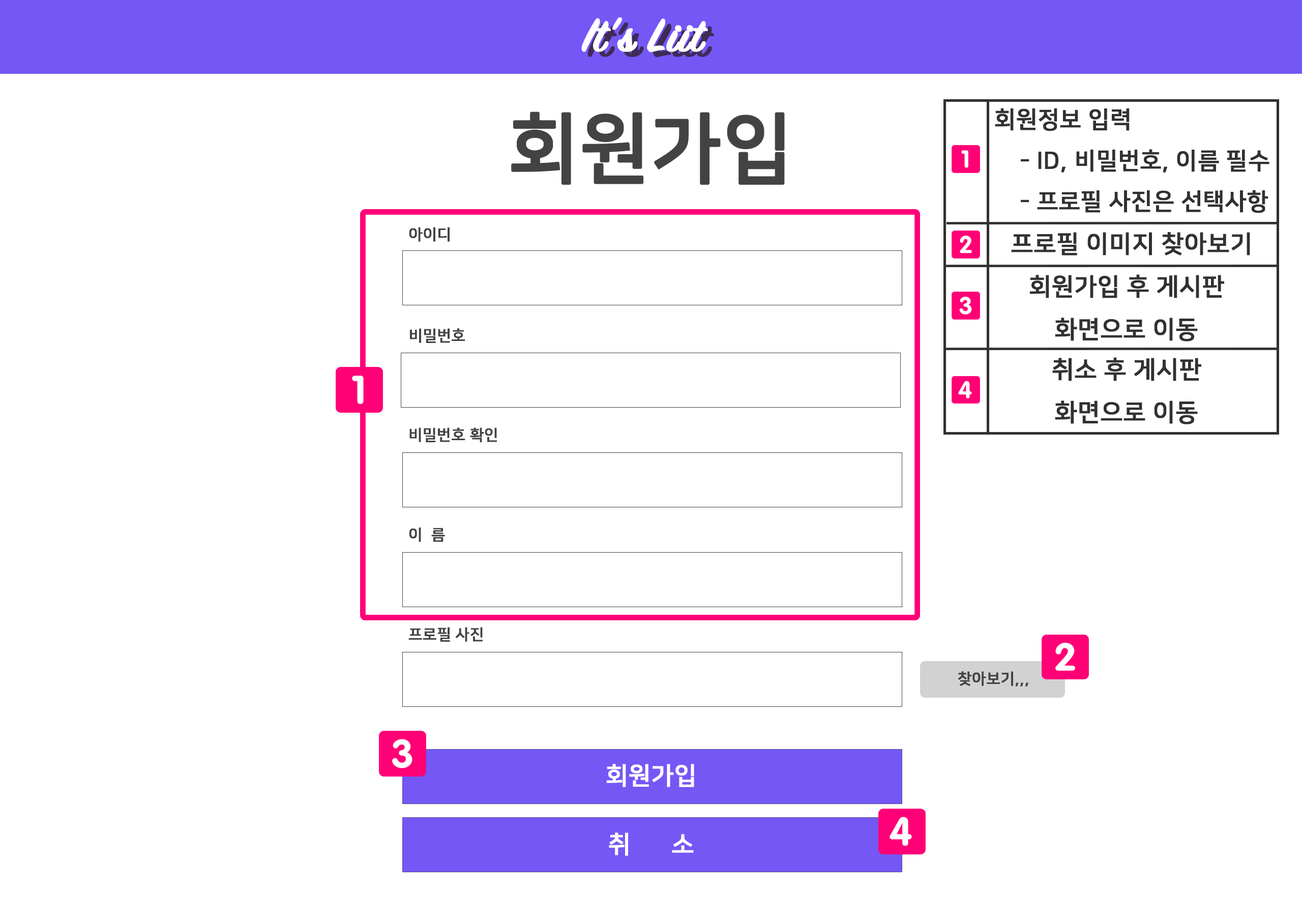
<style>
.page{position:relative;width:1302px;height:916px;background:#ffffff}
.page>*{position:absolute;margin:0}
.t1{font:50.9px "SignPainter-HouseScriptSemibold";color:#ffffff;font-weight:bold}
.t2{font:50.9px "SignPainter-HouseScriptSemibold";color:#3f2b56;font-weight:bold}
.t3{font:76.3px "NanumSquareB";color:#434343;font-weight:bold}
.t4{font:23.4px "NanumSquareB";color:#313131;font-weight:bold}
.t5{font:15.3px "NanumSquareB";color:#434343;font-weight:bold}
.t6{font:24.4px "NanumSquareB";color:#313131;font-weight:bold}
.t7{font:24.4px "NanumSquareB";color:#ffffff;font-weight:bold}
</style>
<div class="page">
<p class="t1" style="left:581px;top:17px;width:127px;height:35px">It’s Liit</p>
<p class="t2" style="left:588px;top:22px;width:126px;height:35px">It’s Liit</p>
<p class="t3" style="left:511px;top:111px;width:274px;height:74px">회원가입</p>
<p class="t4" style="left:995px;top:108px;width:275px;height:105px">회원정보 입력<br>    - ID, 비밀번호, 이름 필수<br>    - 프로필 사진은 선택사항</p>
<p class="t5" style="left:409px;top:227px;width:41px;height:15px">아이디</p>
<p class="t6" style="left:1011px;top:232px;width:239px;height:23px">프로필 이미지 찾아보기</p>
<p class="t6" style="left:1030px;top:274px;width:194px;height:67px;text-align:center">회원가입 후 게시판<br>화면으로 이동</p>
<p class="t5" style="left:410px;top:328px;width:55px;height:15px">비밀번호</p>
<p class="t6" style="left:1052px;top:357px;width:150px;height:67px;text-align:center">취소 후 게시판<br>화면으로 이동</p>
<p class="t5" style="left:410px;top:427px;width:87px;height:15px">비밀번호 확인</p>
<p class="t5" style="left:409px;top:527px;width:36px;height:15px">이  름</p>
<p class="t5" style="left:408px;top:627px;width:75px;height:14px">프로필 사진</p>
<p class="t7" style="left:606px;top:764px;width:88px;height:23px">회원가입</p>
<p class="t7" style="left:609px;top:832px;width:85px;height:24px">취      소</p>
</div>
